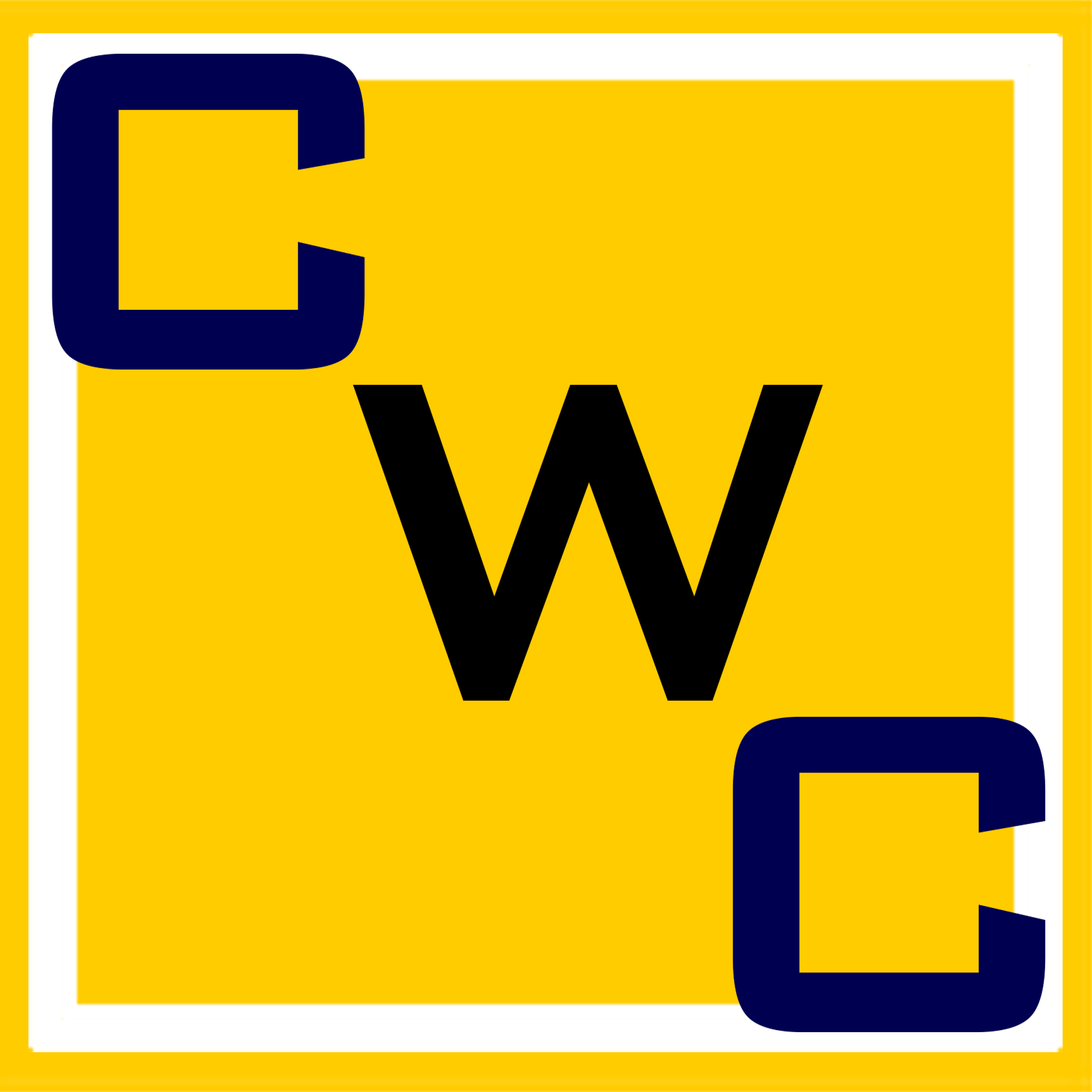
<style>
.page{position:relative;width:1092px;height:1092px;background:#ffcc00}
.page>*{position:absolute;margin:0}
.t1{font:611.4px "BankGothic-Medium";letter-spacing:-0.09em;color:#000051;scale:0.91 1}
.t2{font:611.4px "BankGothic-Medium";letter-spacing:-0.13em;color:#000000;scale:0.91 1}
.t3{font:611.4px "BankGothic-Medium";letter-spacing:-0.13em;color:#000051;scale:0.91 1}
</style>
<div class="page">
<p class="t1" style="left:52px;top:54px;width:313px;height:316px">C</p>
<p class="t2" style="left:353px;top:385px;width:470px;height:316px">W</p>
<p class="t3" style="left:733px;top:717px;width:313px;height:315px">C</p>
</div>
